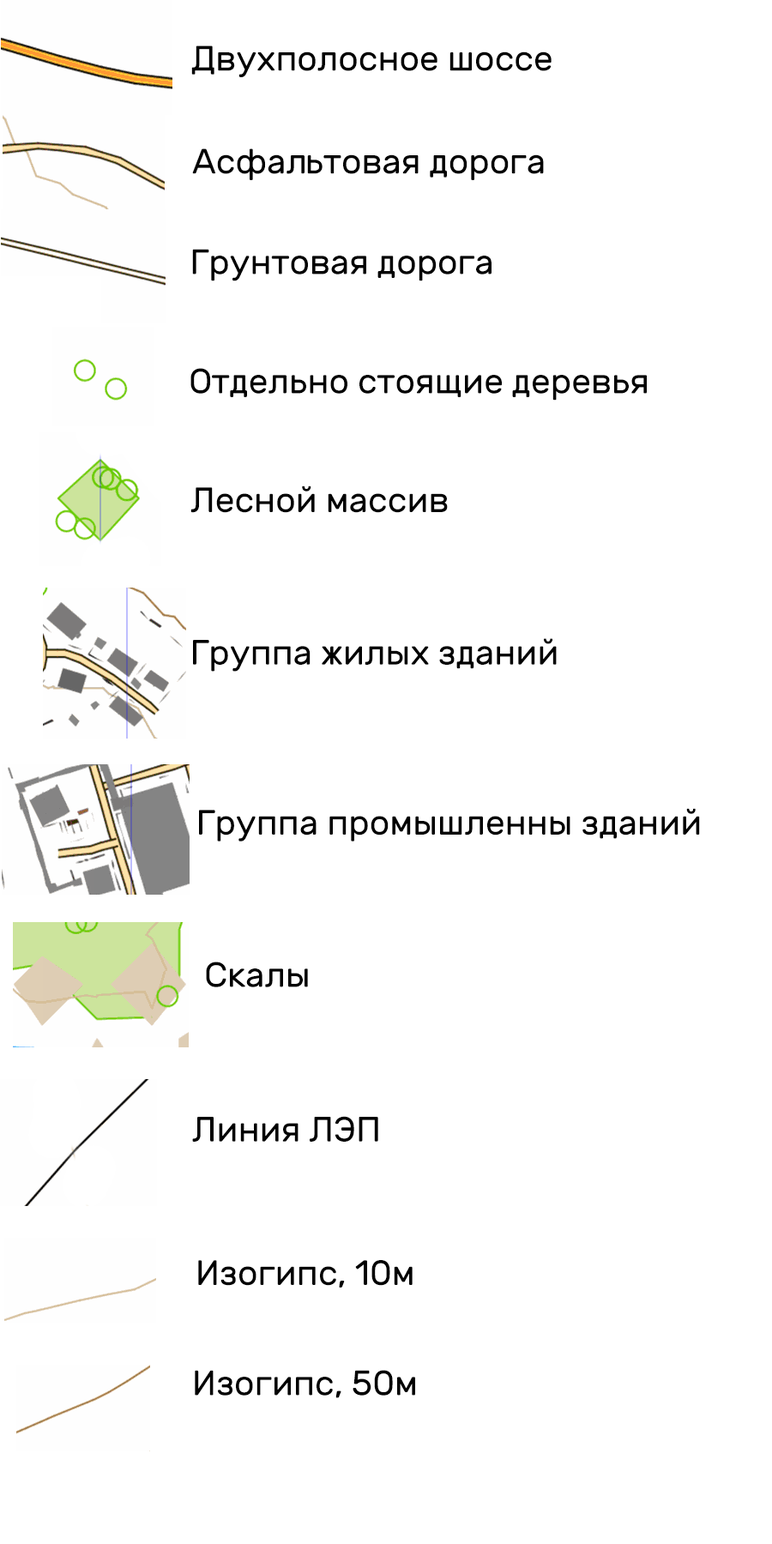
<style>
.page{position:relative;width:772px;height:1544px;background:#ffffff}
.page>*{position:absolute;margin:0}
.t1{font:35px "Rubik-Regular";color:#000000}
</style>
<div class="page">
<p class="t1" style="left:191px;top:45px;width:361px;height:32px">Двухполосное шоссе</p>
<p class="t1" style="left:192px;top:148px;width:352px;height:32px">Асфальтовая дорога</p>
<p class="t1" style="left:192px;top:249px;width:300px;height:32px">Грунтовая дорога</p>
<p class="t1" style="left:190px;top:368px;width:457px;height:33px">Отдельно стоящие деревья</p>
<p class="t1" style="left:190px;top:486px;width:258px;height:27px">Лесной массив</p>
<p class="t1" style="left:193px;top:638px;width:364px;height:34px">Группа жилых зданий</p>
<p class="t1" style="left:199px;top:808px;width:501px;height:34px">Группа промышленны зданий</p>
<p class="t1" style="left:206px;top:962px;width:102px;height:25px">Скалы</p>
<p class="t1" style="left:192px;top:1116px;width:186px;height:26px">Линия ЛЭП</p>
<p class="t1" style="left:198px;top:1260px;width:215px;height:28px">Изогипс, 10м</p>
<p class="t1" style="left:195px;top:1370px;width:220px;height:28px">Изогипс, 50м</p>
</div>
